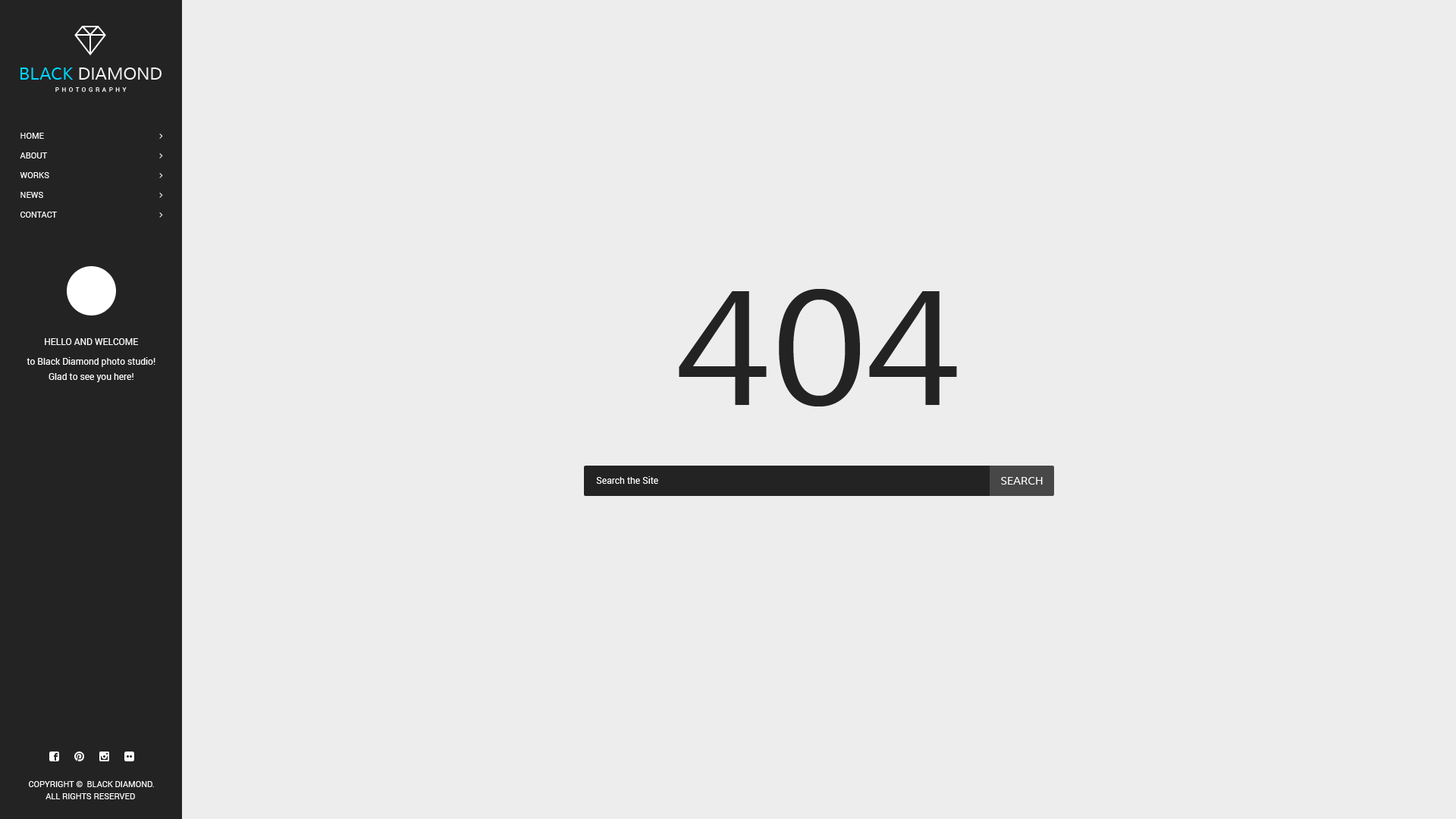
<style>
.page{position:relative;width:1456px;height:819px;background:#ededed}
.page>*{position:absolute;margin:0}
.t1{font:8.3px/19.7px "Roboto-Regular";color:#ffffff;text-transform:uppercase}
.t2{font:163.8px "Muli";color:#232323;text-transform:uppercase}
.t3{font:9.1px/15.2px "Roboto-Regular";color:#ffffff}
.t4{font:9.1px/15.2px "Roboto-Regular";color:#ffffff;text-transform:uppercase}
.t5{font:9.1px/19.7px "Roboto-Regular";color:#ffffff}
.t6{font:9.1px "Roboto-Regular";color:#ffffff}
.t7{font:10.6px "Muli";color:#ffffff;text-transform:uppercase}
.t8{font:8.3px/12.1px "Roboto-Regular";color:#ffffff;text-transform:uppercase}
</style>
<div class="page">
<p class="t1" style="left:20px;top:133px;width:37px;height:85px">home<br>About<br>Works<br>News<br>Contact</p>
<p class="t2" style="left:679px;top:289px;width:278px;height:117px">404</p>
<p class="t3" style="left:27px;top:338px;width:128px;height:44px;text-align:center"><span class="t4">Hello And Welcome<br></span><span class="t5">t</span>o Black Diamond photo studio!<br>Glad to see you here!</p>
<p class="t6" style="left:596px;top:476px;width:62px;height:8px">Search the Site</p>
<p class="t7" style="left:1001px;top:477px;width:42px;height:8px">Search</p>
<p class="t8" style="left:29px;top:781px;width:125px;height:18px;text-align:center">Copyright ©  Black Diamond.<br>All Rights Reserved</p>
</div>
